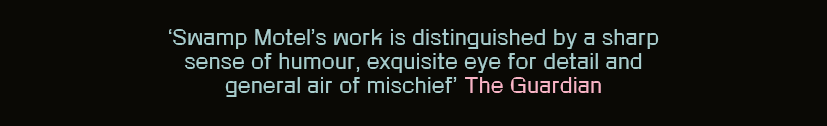
<style>
.page{position:relative;width:827px;height:126px;background:#0a0905}
.page>*{position:absolute;margin:0}
.t1{font:20.1px "RotontoTrial-Regular";letter-spacing:0.05em;color:#a8cdcd}
.t2{font:20.1px "RotontoTrial-Regular";letter-spacing:0.05em;color:#f8b4c5}
</style>
<div class="page">
<p class="t1" style="left:169px;top:29px;width:490px;height:68px;text-align:center">‘Swamp Motel’s work is distinguished by a sharp sense of humour, exquisite eye for detail and general air of mischief’ <span class="t2">The Guardian</span></p>
</div>
